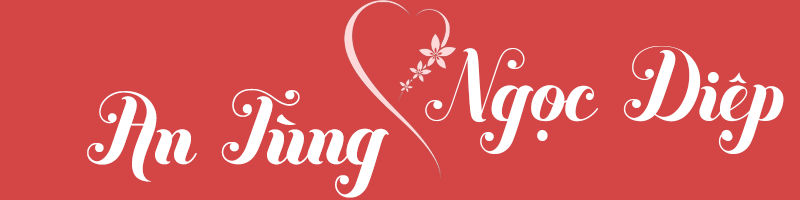
<style>
.page{position:relative;width:800px;height:200px;background:#d44646}
.page>*{position:absolute;margin:0}
.t1{font:104.2px "VNF-Buttermilk";color:#ffffff}
</style>
<div class="page">
<p class="t1" style="left:425px;top:46px;width:359px;height:108px">Ngọc Diệp</p>
<p class="t1" style="left:87px;top:88px;width:302px;height:110px">An Tùng</p>
</div>
